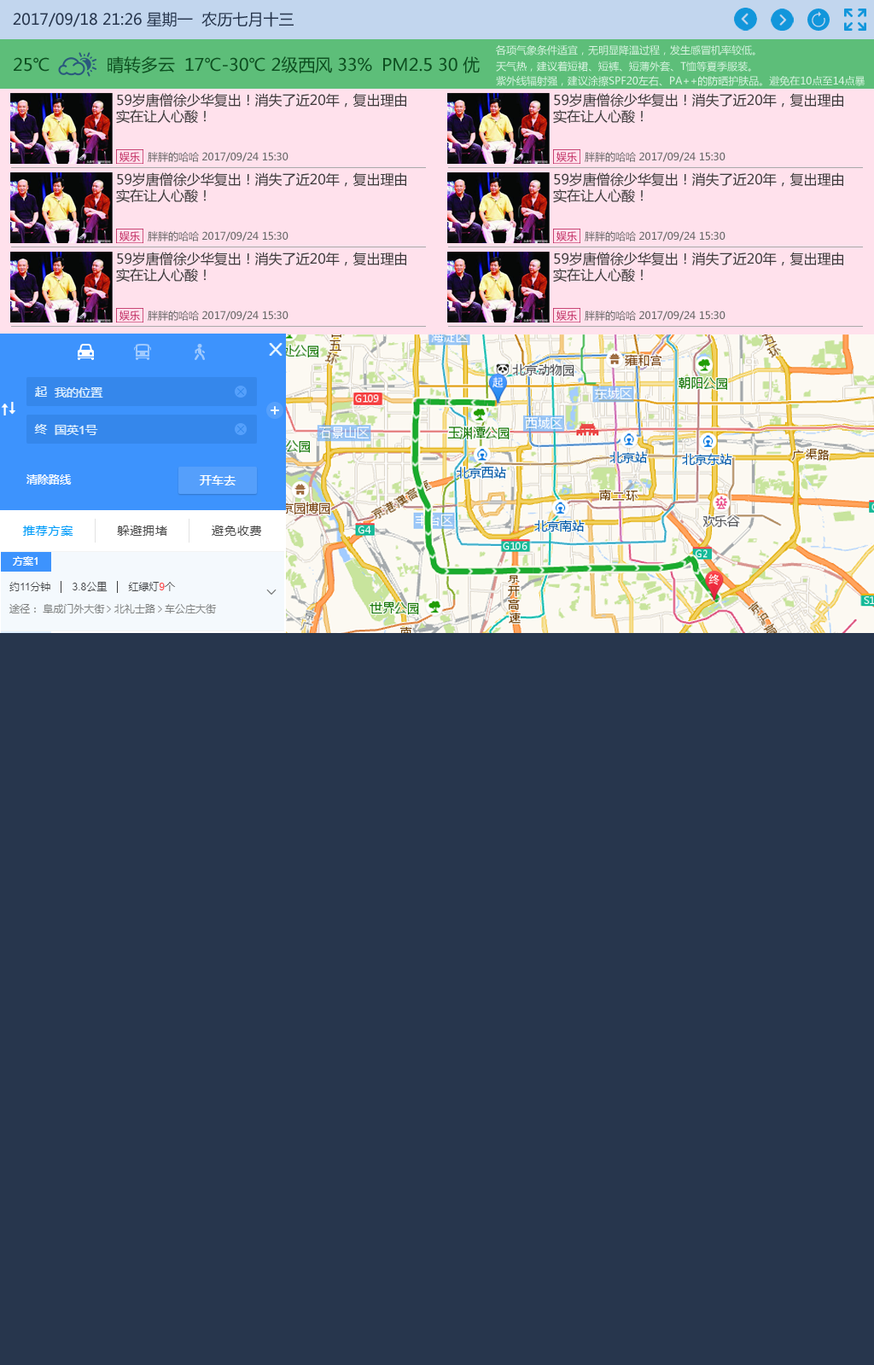
<style>
.page{position:relative;width:874px;height:1365px;background:#27364d}
.page>*{position:absolute;margin:0}
.t1{font:15.4px "MicrosoftYaHei";color:#27364d}
.t2{font:10.2px "MicrosoftYaHei";color:#d9f4e1}
.t3{font:17.1px "MicrosoftYaHei";color:#0d4f20}
.t4{font:13.6px "MicrosoftYaHei";color:#3d3a3b}
.t5{font:10.2px "MicrosoftYaHei";color:#bc2059}
.t6{font:10.2px "MicrosoftYaHei";color:#676767}
</style>
<div class="page">
<p class="t1" style="left:13px;top:12px;width:280px;height:15px">2017/09/18 21:26 星期一  农历七月十三</p>
<p class="t2" style="left:496px;top:45px;width:259px;height:10px">各项气象条件适宜，无明显降温过程，发生感冒机率较低。</p>
<p class="t3" style="left:14px;top:57px;width:35px;height:15px">25℃</p>
<p class="t3" style="left:107px;top:56px;width:68px;height:17px">晴转多云</p>
<p class="t3" style="left:185px;top:56px;width:187px;height:17px">17℃-30℃ 2级西风 33%</p>
<p class="t3" style="left:383px;top:56px;width:96px;height:17px">PM2.5 30 优</p>
<p class="t2" style="left:496px;top:61px;width:255px;height:11px">天气热，建议着短裙、短裤、短薄外套、T恤等夏季服装。</p>
<p class="t2" style="left:496px;top:75px;width:369px;height:11px">紫外线辐射强，建议涂擦SPF20左右、PA++的防晒护肤品。避免在10点至14点暴</p>
<p class="t4" style="left:116px;top:93px;width:290px;height:31px">59岁唐僧徐少华复出！消失了近20年，复出理由<br>实在让人心酸！</p>
<p class="t4" style="left:553px;top:93px;width:290px;height:31px">59岁唐僧徐少华复出！消失了近20年，复出理由<br>实在让人心酸！</p>
<p class="t5" style="left:119px;top:152px;width:21px;height:10px">娱乐</p>
<p class="t6" style="left:148px;top:152px;width:140px;height:10px">胖胖的哈哈 2017/09/24 15:30</p>
<p class="t5" style="left:556px;top:152px;width:21px;height:10px">娱乐</p>
<p class="t6" style="left:584px;top:152px;width:141px;height:10px">胖胖的哈哈 2017/09/24 15:30</p>
<p class="t4" style="left:116px;top:172px;width:290px;height:31px">59岁唐僧徐少华复出！消失了近20年，复出理由<br>实在让人心酸！</p>
<p class="t4" style="left:553px;top:172px;width:290px;height:31px">59岁唐僧徐少华复出！消失了近20年，复出理由<br>实在让人心酸！</p>
<p class="t5" style="left:119px;top:231px;width:21px;height:10px">娱乐</p>
<p class="t6" style="left:148px;top:231px;width:140px;height:10px">胖胖的哈哈 2017/09/24 15:30</p>
<p class="t5" style="left:556px;top:231px;width:21px;height:10px">娱乐</p>
<p class="t6" style="left:584px;top:231px;width:141px;height:10px">胖胖的哈哈 2017/09/24 15:30</p>
<p class="t4" style="left:116px;top:252px;width:290px;height:30px">59岁唐僧徐少华复出！消失了近20年，复出理由<br>实在让人心酸！</p>
<p class="t4" style="left:553px;top:252px;width:290px;height:30px">59岁唐僧徐少华复出！消失了近20年，复出理由<br>实在让人心酸！</p>
<p class="t5" style="left:119px;top:311px;width:21px;height:10px">娱乐</p>
<p class="t6" style="left:148px;top:311px;width:140px;height:10px">胖胖的哈哈 2017/09/24 15:30</p>
<p class="t5" style="left:556px;top:311px;width:21px;height:10px">娱乐</p>
<p class="t6" style="left:584px;top:311px;width:141px;height:10px">胖胖的哈哈 2017/09/24 15:30</p>
</div>
